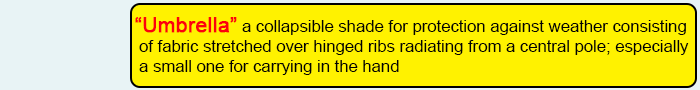
<style>
.page{position:relative;width:700px;height:90px;background:#fff200}
.page>*{position:absolute;margin:0}
.t1{font:16.7px "ArialMT";color:#020202}
.t2{font:20.8px "ArialMT";color:#fd010d;font-weight:bold}
</style>
<div class="page">
<p class="t1" style="left:135px;top:17px;width:554px;height:58px"><span class="t2">“Umbrella”</span> a collapsible shade for protection against weather consisting<br> of fabric stretched over hinged ribs radiating from a central pole; especially <br> a small one for carrying in the hand</p>
</div>
